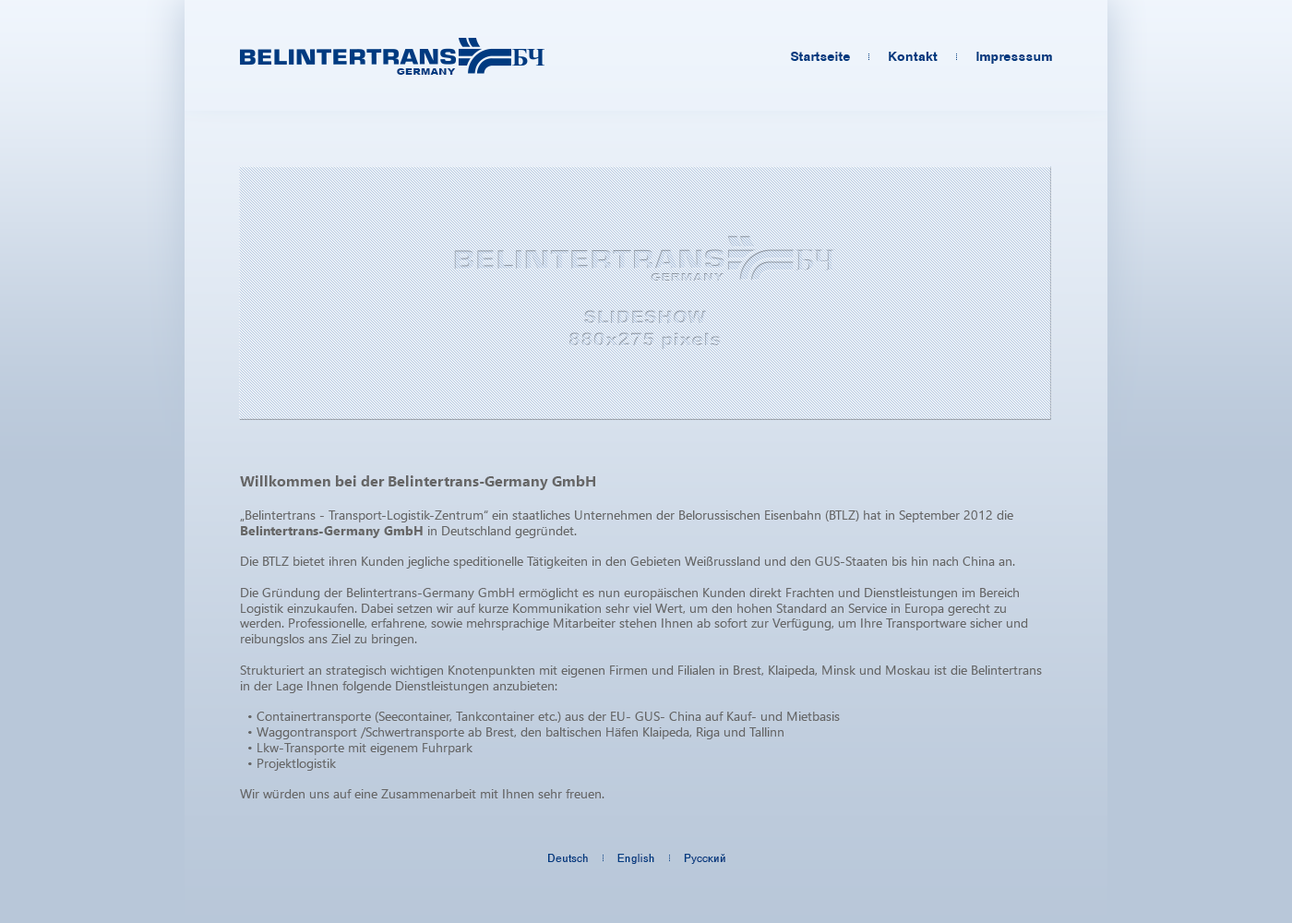
<style>
.page{position:relative;width:1292px;height:923px}
.page>*{position:absolute;margin:0}
.t1{font:12.9px "AGHelveticaBold";color:#003a80}
.t2{font:8.6px "Arial-Black";color:#003a80;scale:1.21 1}
.t3{font:12.9px "SegoeUI";color:#666666}
.t4{font:14.8px "SegoeUI-Bold";color:#666666}
.t5{font:12.9px "SegoeUI-Bold";color:#666666}
.t6{font:11.1px "AGHelvetica";color:#003a80}
</style>
<div class="page">
<p class="t1" style="left:791px;top:52px;width:59px;height:9px">Startseite</p>
<p class="t1" style="left:889px;top:52px;width:49px;height:9px">Kontakt</p>
<p class="t1" style="left:976px;top:52px;width:76px;height:12px">Impresssum</p>
<p class="t2" style="left:397px;top:68px;width:59px;height:7px">GERMANY</p>
<p class="t3" style="left:240px;top:475px;width:802px;height:323px"><span class="t4">Willkommen bei der Belintertrans-Germany GmbH<br><br></span>„Belintertrans - Transport-Logistik-Zentrum“ ein staatliches Unternehmen der Belorussischen Eisenbahn (BTLZ) hat in September 2012 die <span class="t5">Belintertrans-Germany GmbH</span> in Deutschland gegründet.<br><br>Die BTLZ bietet ihren Kunden jegliche speditionelle Tätigkeiten in den Gebieten Weißrussland und den GUS-Staaten bis hin nach China an.<br><br>Die Gründung der Belintertrans-Germany GmbH ermöglicht es nun europäischen Kunden direkt Frachten und Dienstleistungen im Bereich Logistik einzukaufen. Dabei setzen wir auf kurze Kommunikation sehr viel Wert, um den hohen Standard an Service in Europa gerecht zu werden. Professionelle, erfahrene, sowie mehrsprachige Mitarbeiter stehen Ihnen ab sofort zur Verfügung, um Ihre Transportware sicher und reibungslos ans Ziel zu bringen.<br><br>Strukturiert an strategisch wichtigen Knotenpunkten mit eigenen Firmen und Filialen in Brest, Klaipeda, Minsk und Moskau ist die Belintertrans in der Lage Ihnen folgende Dienstleistungen anzubieten:<br><br>• Containertransporte (Seecontainer, Tankcontainer etc.) aus der EU- GUS- China auf Kauf- und Mietbasis<br>• Waggontransport /Schwertransporte ab Brest, den baltischen Häfen Klaipeda, Riga und Tallinn<br>• Lkw-Transporte mit eigenem Fuhrpark<br>• Projektlogistik<br><br>Wir würden uns auf eine Zusammenarbeit mit Ihnen sehr freuen.</p>
<p class="t6" style="left:548px;top:854px;width:40px;height:8px">Deutsch</p>
<p class="t6" style="left:617px;top:854px;width:37px;height:10px">English</p>
<p class="t6" style="left:684px;top:854px;width:41px;height:10px">Русский</p>
</div>
